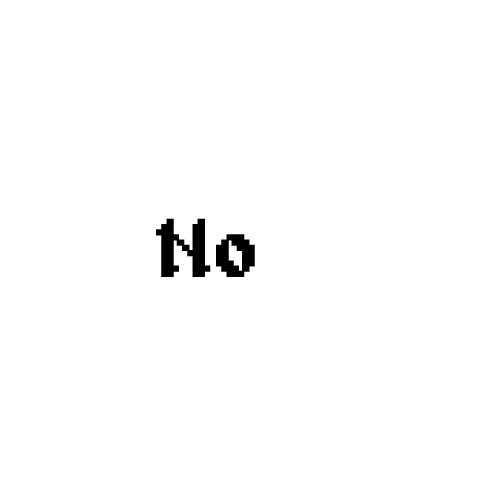
<style>
.page{position:relative;width:500px;height:500px;background:#ffffff}
.page>*{position:absolute;margin:0}
.t1{font:83.2px "Alagard";color:#000000;font-weight:bold}
</style>
<div class="page">
<p class="t1" style="left:156px;top:218px;width:99px;height:59px">No</p>
</div>
